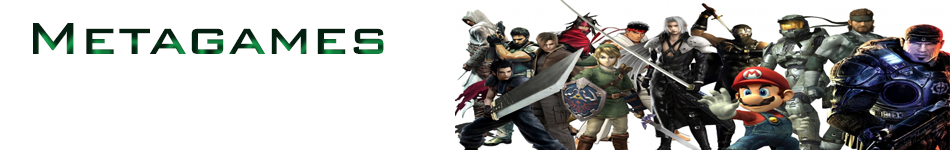
<style>
.page{position:relative;width:950px;height:150px;background:#ffffff}
.page>*{position:absolute;margin:0}
.t1{font:60px "BankGothicBT-Medium"}
</style>
<div class="page">
<p class="t1" style="left:33px;top:23px;width:351px;height:31px">Metagames</p>
</div>
